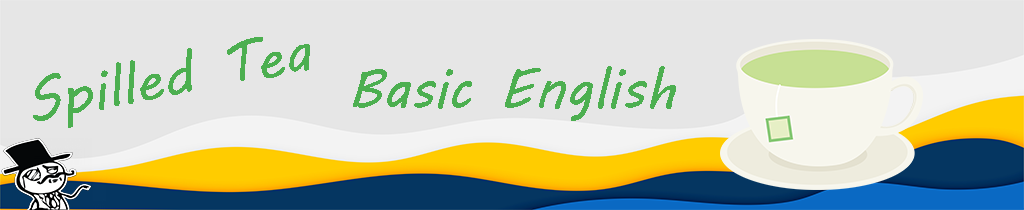
<style>
.page{position:relative;width:1024px;height:210px;background:#e6e6e6}
.page>*{position:absolute;margin:0}
.t1{font:56.9px "MVBoli";color:#4caf50}
.t2{font:113.8px "LucidaHandwriting-Italic";color:#4caf50}
.t3{font:256px "LucidaHandwriting-Italic";color:#4caf50}
</style>
<div class="page">
<p class="t1" style="left:33px;top:37px;width:277px;height:91px;text-align:center;rotate:-10deg">Spilled Tea<br><span class="t2">Spilled<br></span><span class="t3">Spilled</span></p>
<p class="t1" style="left:353px;top:66px;width:323px;height:55px">Basic English</p>
</div>
